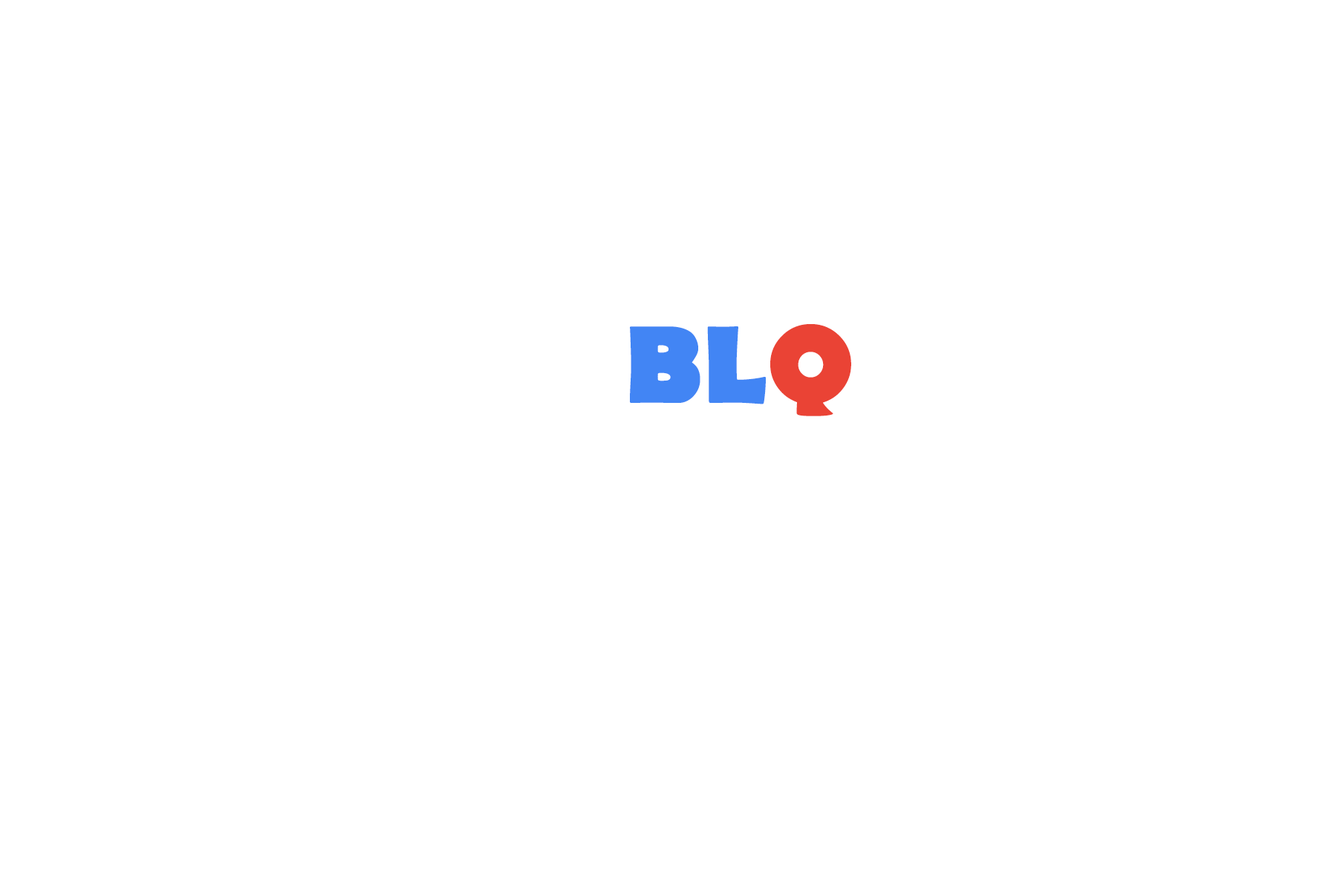
<style>
.page{position:relative;width:1337px;height:892px;background:#ffffff}
.page>*{position:absolute;margin:0}
.t1{font:111.5px "BerlinSansFB-Bold";color:#4285f4}
.t2{font:111.5px "BerlinSansFB-Bold";color:#ea4335}
</style>
<div class="page">
<p class="t1" style="left:630px;top:324px;width:221px;height:92px">BL<span class="t2">Q</span></p>
</div>
